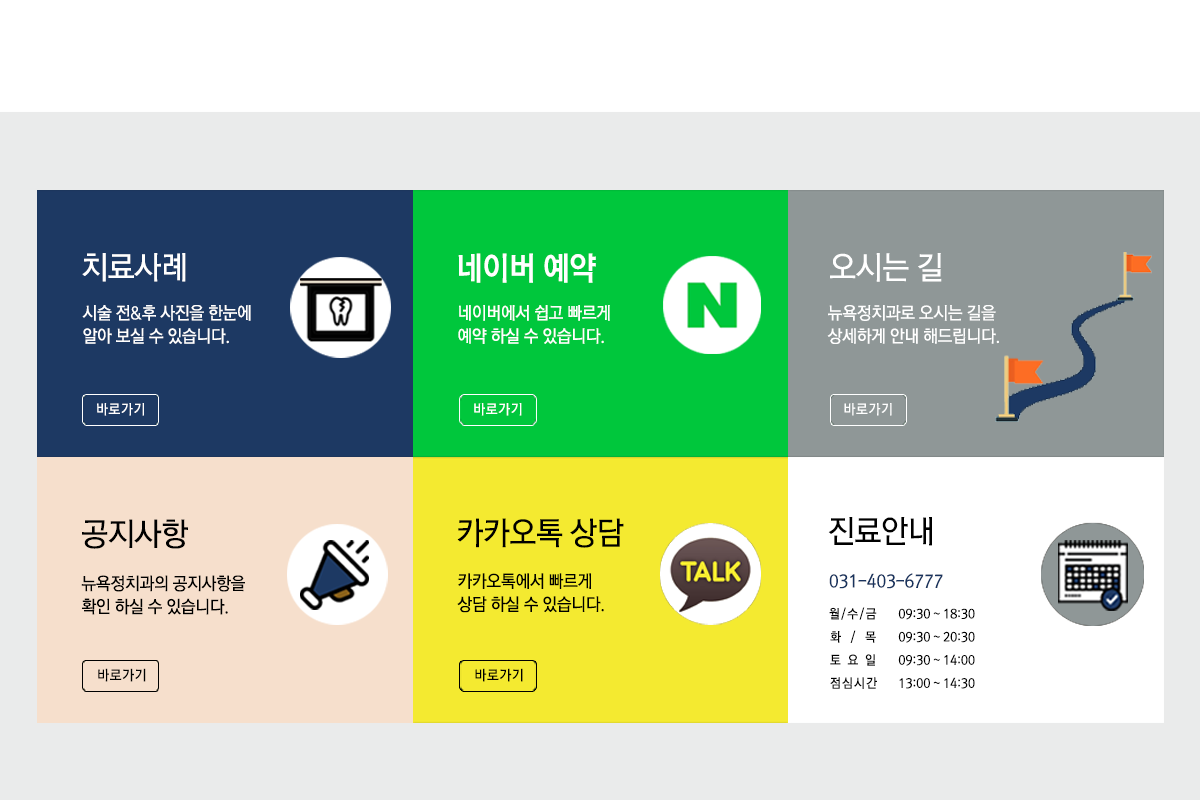
<style>
.page{position:relative;width:1200px;height:800px;background:#ffffff}
.page>*{position:absolute;margin:0}
.t1{font:31.8px "RixGoM";letter-spacing:-0.015em;color:#ffffff;scale:0.95 1}
.t2{font:32.3px "RixGoB";letter-spacing:-0.015em;color:#ffffff;scale:0.93 1}
.t3{font:17.3px/23.1px "RixGoM";letter-spacing:-0.015em;color:#ffffff;scale:0.95 1}
.t4{font:13.9px "RixGoM";letter-spacing:0.05em;color:#ffffff;scale:0.95 1}
.t5{font:31.8px "RixGoM";letter-spacing:-0.015em;color:#000000;scale:0.95 1}
.t6{font:17.3px/23.1px "RixGoM";letter-spacing:-0.015em;color:#000000;scale:0.95 1}
.t7{font:17.3px "RixGoM";letter-spacing:-0.015em;color:#18335e;scale:0.95 1}
.t8{font:12.7px "RixGoM";letter-spacing:-0.1em;color:#000000;scale:0.95 1}
.t9{font:12.7px "RixGoM";letter-spacing:-0.015em;color:#000000;scale:0.95 1}
.t10{font:12.7px "RixGoM";letter-spacing:-0.06em;color:#000000;scale:0.95 1}
.t11{font:13.9px "RixGoM";letter-spacing:0.05em;color:#000000;scale:0.95 1}
.t12{font:12.7px "RixGoM";letter-spacing:0.1em;color:#000000;scale:0.95 1}
</style>
<div class="page">
<p class="t1" style="left:82px;top:253px;width:104px;height:29px">치료사례</p>
<p class="t2" style="left:458px;top:253px;width:138px;height:30px">네이버 예약</p>
<p class="t1" style="left:830px;top:253px;width:112px;height:29px">오시는 길</p>
<p class="t3" style="left:82px;top:305px;width:169px;height:39px">시술 전&amp;후 사진을 한눈에<br>알아 보실 수 있습니다.</p>
<p class="t3" style="left:458px;top:305px;width:152px;height:39px">네이버에서 쉽고 빠르게<br>예약 하실 수 있습니다.</p>
<p class="t3" style="left:827px;top:305px;width:172px;height:39px">뉴욕정치과로 오시는 길을<br>상세하게 안내 해드립니다.</p>
<p class="t4" style="left:97px;top:403px;width:47px;height:13px">바로가기</p>
<p class="t4" style="left:474px;top:403px;width:48px;height:13px">바로가기</p>
<p class="t4" style="left:844px;top:403px;width:48px;height:13px">바로가기</p>
<p class="t5" style="left:82px;top:519px;width:106px;height:30px">공지사항</p>
<p class="t5" style="left:457px;top:518px;width:167px;height:30px">카카오톡 상담</p>
<p class="t5" style="left:828px;top:517px;width:104px;height:29px">진료안내</p>
<p class="t6" style="left:81px;top:575px;width:164px;height:40px">뉴욕정치과의 공지사항을<br>확인 하실 수 있습니다.</p>
<p class="t6" style="left:457px;top:573px;width:147px;height:40px">카카오톡에서 빠르게<br>상담 하실 수 있습니다.</p>
<p class="t7" style="left:829px;top:573px;width:114px;height:16px">031-403-6777</p>
<p class="t8" style="left:829px;top:607px;width:48px;height:13px">월 / 수 / 금</p>
<p class="t9" style="left:898px;top:608px;width:77px;height:12px">09:30 ~ 18:30</p>
<p class="t10" style="left:830px;top:630px;width:46px;height:13px">화    /    목</p>
<p class="t9" style="left:898px;top:631px;width:77px;height:12px">09:30 ~ 20:30</p>
<p class="t10" style="left:830px;top:654px;width:45px;height:12px">토   요   일</p>
<p class="t9" style="left:898px;top:654px;width:77px;height:12px">09:30 ~ 14:00</p>
<p class="t11" style="left:98px;top:668px;width:48px;height:14px">바로가기</p>
<p class="t11" style="left:475px;top:668px;width:48px;height:14px">바로가기</p>
<p class="t12" style="left:830px;top:677px;width:47px;height:12px">점심시간</p>
<p class="t9" style="left:899px;top:677px;width:76px;height:12px">13:00 ~ 14:30</p>
</div>
